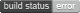
<style>
.page{position:relative;width:80px;height:13px}
.page>*{position:absolute;margin:0}
.t1{font:10px "ArialMT";color:#cccccc;scale:0.9 1}
.t2{font:10px "ArialMT";color:#ffffff;scale:0.9 1}
</style>
<div class="page">
<p class="t1" style="left:4px;top:2px;width:46px;height:7px">build status</p>
<p class="t2" style="left:56px;top:4px;width:20px;height:5px">error</p>
</div>
